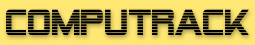
<style>
.page{position:relative;width:255px;height:45px;background:#ffe773}
.page>*{position:absolute;margin:0}
.t1{font:36px "AlienEncounters";color:#000000}
</style>
<div class="page">
<p class="t1" style="left:6px;top:9px;width:243px;height:26px">CompuTrack</p>
</div>
